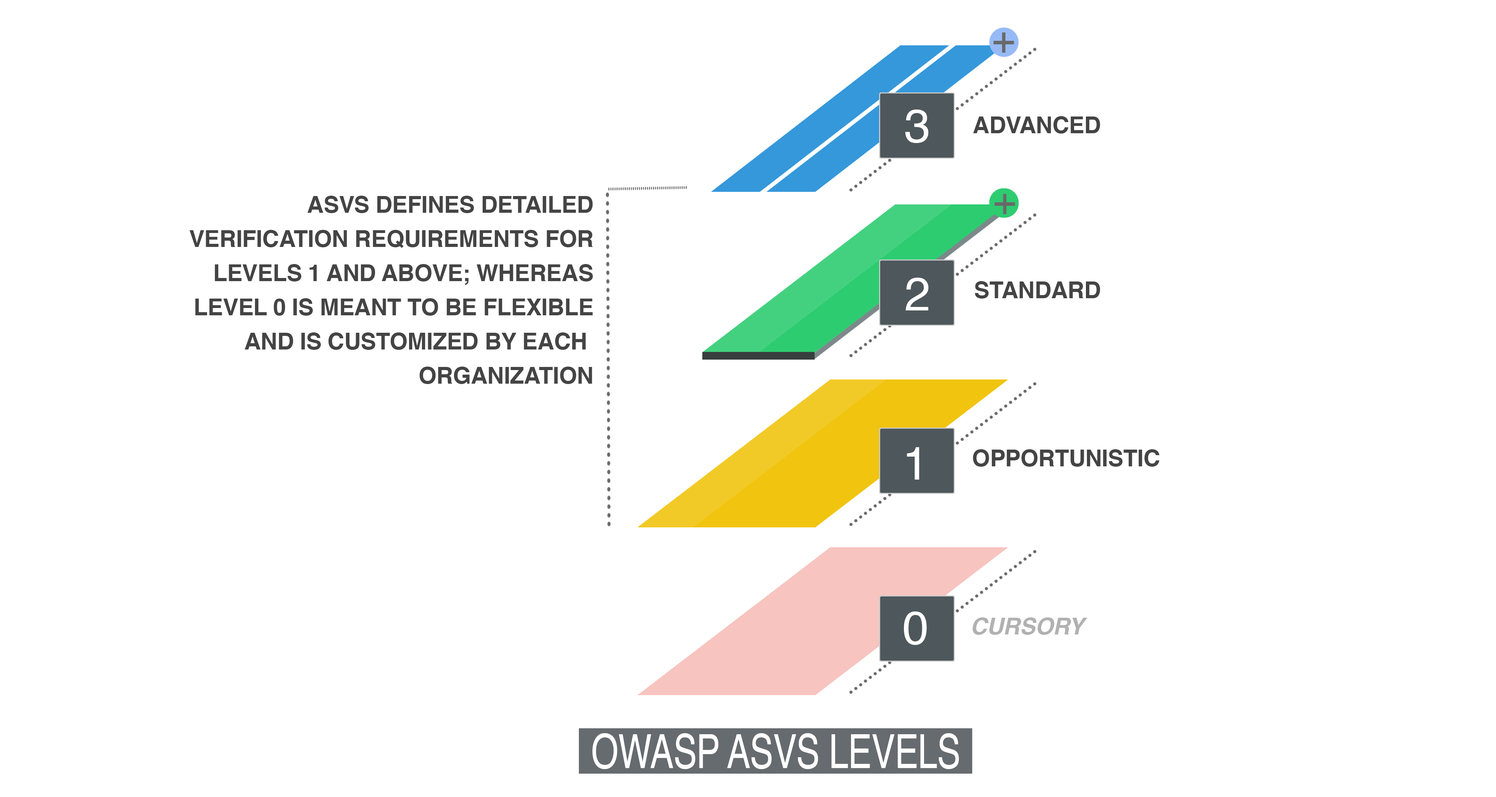
<style>
.page{position:relative;width:1496px;height:797px;background:#ffffff}
.page>*{position:absolute;margin:0}
.t1{font:40px "Helvetica";letter-spacing:-0.01em;color:#696969}
.t2{font:47px "Helvetica";letter-spacing:-0.01em;color:#ffffff}
.t3{font:23.2px "Helvetica-Bold";letter-spacing:-0.01em;color:#444444}
.t4{font:23.2px/34.2px "Helvetica-Bold";letter-spacing:-0.01em;color:#444444}
.t5{font:23.2px "Helvetica-BoldOblique";letter-spacing:-0.01em;color:#b1b1b1}
.t6{font:47px "Helvetica";letter-spacing:-0.01em;color:#ffffff;scale:0.75 1}
</style>
<div class="page">
<p class="t1" style="left:994px;top:32px;width:20px;height:21px">+</p>
<p class="t2" style="left:905px;top:110px;width:24px;height:33px">3</p>
<p class="t3" style="left:973px;top:116px;width:127px;height:18px">ADVANCED</p>
<p class="t4" style="left:189px;top:196px;width:404px;height:188px;text-align:right">ASVS DEFINES DETAILED<br>VERIFICATION REQUIREMENTS FOR<br>LEVELS 1 AND ABOVE; WHEREAS<br>LEVEL 0 IS MEANT TO BE FLEXIBLE<br>AND IS CUSTOMIZED BY EACH <br>ORGANIZATION</p>
<p class="t1" style="left:995px;top:194px;width:20px;height:20px">+</p>
<p class="t2" style="left:906px;top:278px;width:23px;height:32px">2</p>
<p class="t3" style="left:975px;top:281px;width:125px;height:18px">STANDARD</p>
<p class="t2" style="left:907px;top:447px;width:12px;height:33px">1</p>
<p class="t3" style="left:973px;top:449px;width:187px;height:18px">OPPORTUNISTIC</p>
<p class="t2" style="left:904px;top:611px;width:23px;height:34px">0</p>
<p class="t5" style="left:973px;top:617px;width:114px;height:18px">CURSORY</p>
<p class="t6" style="left:592px;top:733px;width:367px;height:36px">OWASP ASVS LEVELS</p>
</div>
